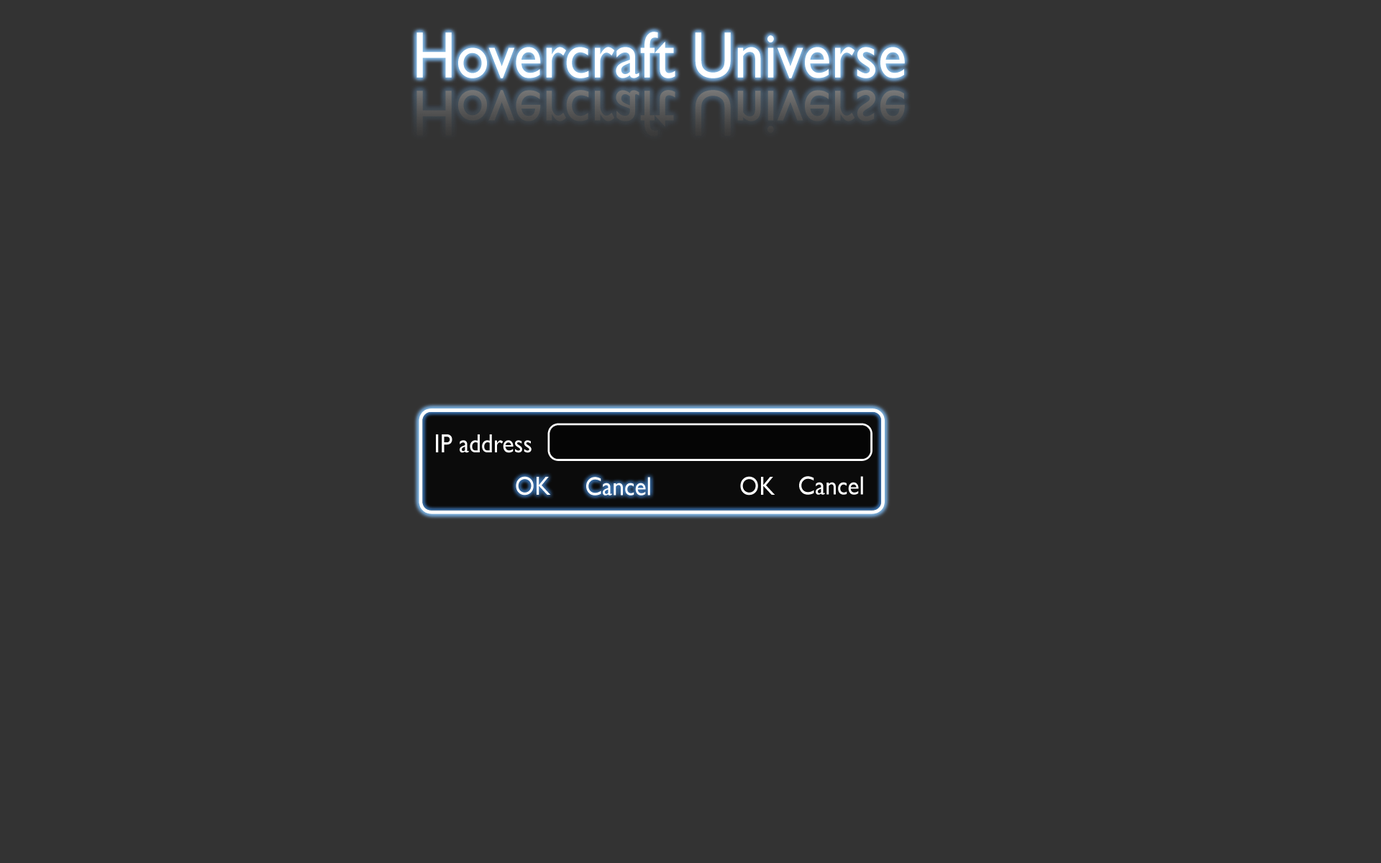
<style>
.page{position:relative;width:1381px;height:863px;background:#333333}
.page>*{position:absolute;margin:0}
.t1{font:65.9px "GillSansMT";color:#ffffff;scale:0.91 1}
.t2{font:26.4px "GillSansMT";color:#ffffff;scale:0.91 1}
</style>
<div class="page">
<p class="t1" style="left:417px;top:32px;width:488px;height:46px">Hovercraft Universe</p>
<p class="t2" style="left:436px;top:435px;width:96px;height:18px">IP address</p>
<p class="t2" style="left:516px;top:476px;width:35px;height:20px">OK</p>
<p class="t2" style="left:586px;top:477px;width:64px;height:19px">Cancel</p>
<p class="t2" style="left:740px;top:476px;width:36px;height:20px">OK</p>
<p class="t2" style="left:799px;top:476px;width:64px;height:19px">Cancel</p>
</div>
